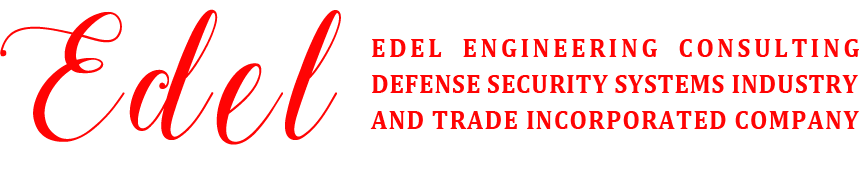
<style>
.page{position:relative;width:862px;height:175px;background:#ffffff}
.page>*{position:absolute;margin:0}
.t1{font:171px "StylishCalligraphyDemo";letter-spacing:0.07em;color:#ff0404;scale:0.94 1}
.t2{font:27px "Cambria-Bold";letter-spacing:0.028em;color:#ff0404;scale:0.93 1}
.t3{font:27px "Cambria-Bold";letter-spacing:0.133em;color:#ff0404;scale:0.93 1}
.t4{font:27px "Cambria-Bold";letter-spacing:0.045em;color:#ff0404;scale:0.93 1}
</style>
<div class="page">
<p class="t1" style="left:0px;top:9px;width:341px;height:136px">Edel</p>
<p class="t2" style="left:370px;top:39px;width:489px;height:90px;text-align:justify"><span class="t3">EDEL  ENGINEERING  CONSULTING<br></span>DEFENSE SECURITY SYSTEMS INDUSTRY<br><span class="t4">AND TRADE INCORPORATED COMPANY</span></p>
</div>
